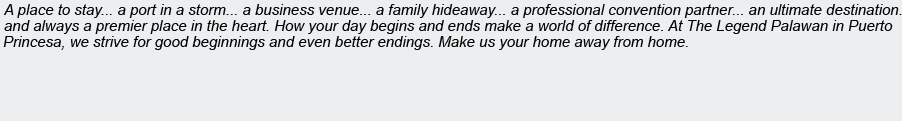
<style>
.page{position:relative;width:902px;height:121px;background:#edeef0}
.page>*{position:absolute;margin:0}
.t1{font:15px "Arial-ItalicMT";color:#000000}
</style>
<div class="page">
<p class="t1" style="left:4px;top:20px;width:889px;height:14px">and always a premier place in the heart. How your day begins and ends make a world of difference. At The Legend Palawan in Puerto</p>
<p class="t1" style="left:3px;top:36px;width:685px;height:14px">Princesa, we strive for good beginnings and even better endings. Make us your home away from home.</p>
</div>
